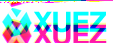
<style>
.page{position:relative;width:113px;height:43px;background:#ffffff}
.page>*{position:absolute;margin:0}
.t1{font:28px "HelveticaNeue-Bold";letter-spacing:-0.025em}
</style>
<div class="page">
<p class="t1" style="left:33px;top:11px;width:74px;height:22px">XUEZ</p>
</div>
